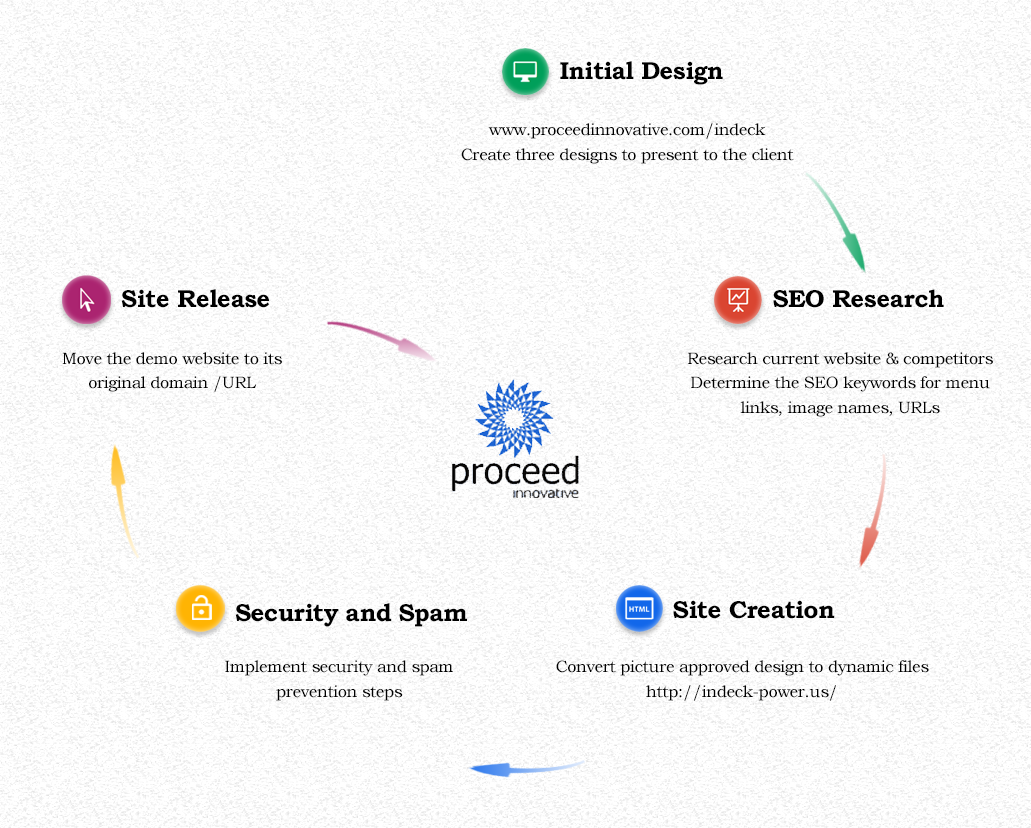
<style>
.page{position:relative;width:1031px;height:828px;background:#ffffff}
.page>*{position:absolute;margin:0}
.t1{font:24.7px "BookmanOldStyle-Bold";letter-spacing:-0.025em;color:#000000}
.t2{font:16.5px/24.7px "BookmanOldStyle";letter-spacing:-0.025em;color:#000000}
.t3{font:24.6px "BookmanOldStyle-Bold";letter-spacing:-0.025em;color:#000000}
.t4{font:16.4px/24.6px "BookmanOldStyle";letter-spacing:-0.025em;color:#000000}
</style>
<div class="page">
<p class="t1" style="left:560px;top:61px;width:163px;height:24px">Initial Design</p>
<p class="t2" style="left:461px;top:123px;width:333px;height:41px;text-align:center">www.proceedinnovative.com/indeck<br>Create three designs to present to the client</p>
<p class="t3" style="left:121px;top:289px;width:149px;height:19px">Site Release</p>
<p class="t3" style="left:773px;top:289px;width:171px;height:19px">SEO Research</p>
<p class="t4" style="left:62px;top:352px;width:220px;height:40px;text-align:center">Move the demo website to its original domain /URL</p>
<p class="t4" style="left:688px;top:352px;width:305px;height:65px;text-align:center">Research current website &amp; competitors<br>Determine the SEO keywords for menu links, image names, URLs</p>
<p class="t1" style="left:235px;top:603px;width:232px;height:24px">Security and Spam</p>
<p class="t3" style="left:673px;top:600px;width:162px;height:19px">Site Creation</p>
<p class="t2" style="left:225px;top:660px;width:228px;height:41px;text-align:center">Implement security and spam prevention steps</p>
<p class="t4" style="left:556px;top:660px;width:373px;height:41px;text-align:center">Convert picture approved design to dynamic files<br>http://indeck-power.us/</p>
</div>
